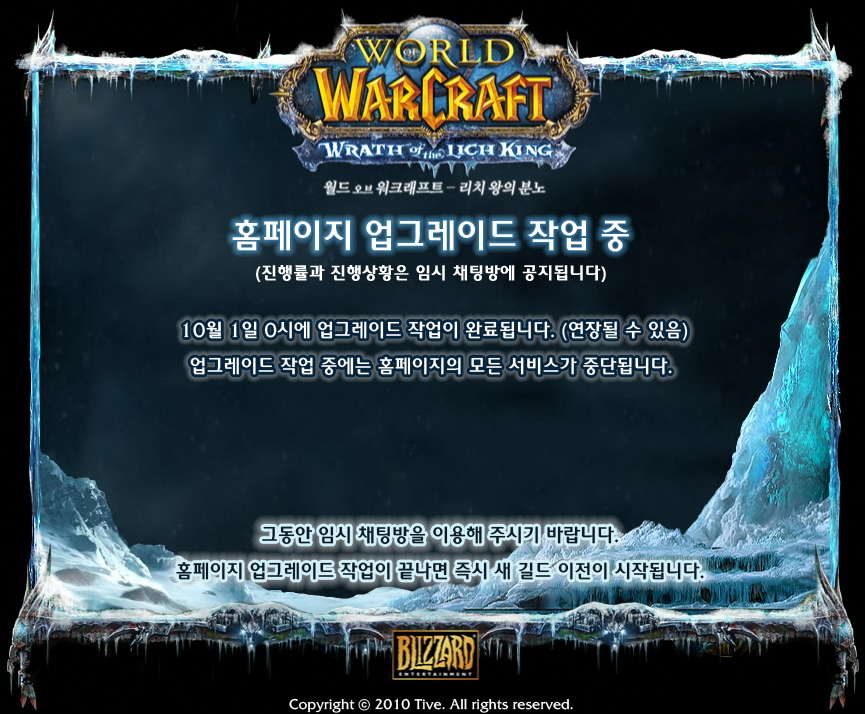
<style>
.page{position:relative;width:865px;height:714px}
.page>*{position:absolute;margin:0}
.t1{font:36px "2002L";color:#ffffff}
.t2{font:18px "2002L";color:#ffffff;font-weight:bold}
.t3{font:20px/36px "2002L";color:#ffffff}
.t4{font:20px/36px "2002L";color:#0c1a23}
.t5{font:14px "2002L";color:#ffffff}
</style>
<div class="page">
<p class="t1" style="left:232px;top:219px;width:397px;height:33px">홈페이지 업그레이드 작업 중</p>
<p class="t2" style="left:256px;top:265px;width:350px;height:17px">(진행률과 진행상황은 임시 채팅방에 공지됩니다)</p>
<p class="t3" style="left:183px;top:321px;width:505px;height:55px;text-align:center">10월 1일 0시에 업그레이드 작업이 완료됩니다. (연장될 수 있음)<br>업그레이드 작업 중에는 홈페이지의 모든 서비스가 중단됩니다.</p>
<p class="t4" style="left:176px;top:526px;width:528px;height:54px;text-align:center">그동안 임시 채팅방을 이용해 주시기 바랍니다.<br>홈페이지 업그레이드 작업이 끝나면 즉시 새 길드 이전이 시작됩니다.</p>
<p class="t5" style="left:289px;top:698px;width:284px;height:15px">Copyright ⓒ 2010 Tive. All rights reserved.</p>
</div>
